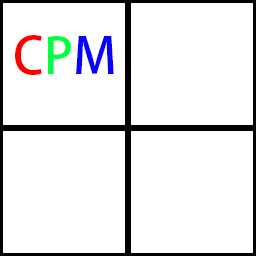
<style>
.page{position:relative;width:256px;height:256px;background:#ffffff}
.page>*{position:absolute;margin:0}
.t1{font:50px "AdobeHeitiStd-Regular";color:#ff0000}
.t2{font:50px "AdobeHeitiStd-Regular";color:#00ff40}
.t3{font:50px "AdobeHeitiStd-Regular";color:#0900ff}
</style>
<div class="page">
<p class="t1" style="left:15px;top:35px;width:99px;height:40px">C<span class="t2">P</span><span class="t3">M</span></p>
</div>
